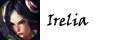
<style>
.page{position:relative;width:140px;height:40px;background:#ffffff}
.page>*{position:absolute;margin:0}
.t1{font:12px "VinerHandITC";color:#000000}
</style>
<div class="page">
<p class="t1" style="left:46px;top:13px;width:43px;height:14px">Irelia</p>
</div>
